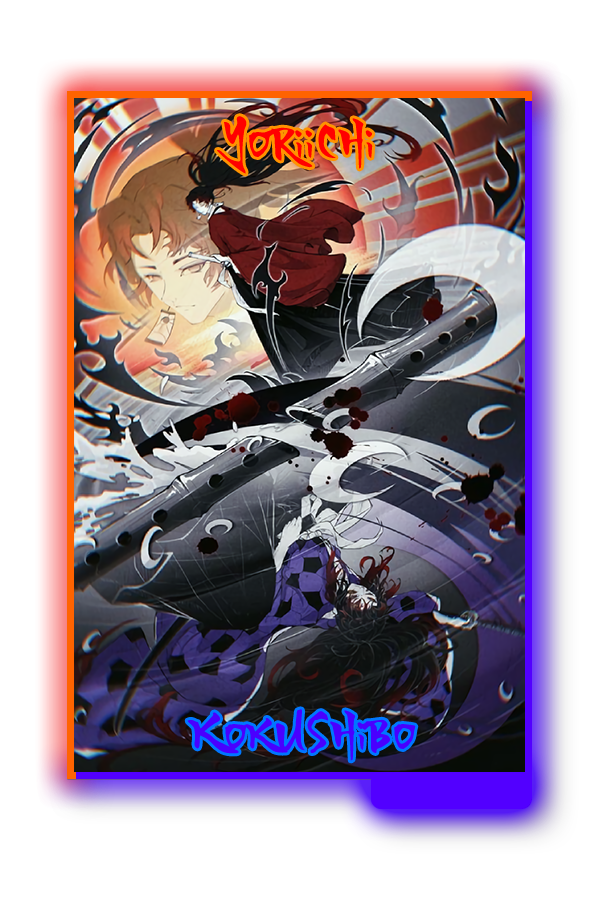
<style>
.page{position:relative;width:600px;height:900px;background:#ffffff}
.page>*{position:absolute;margin:0}
.t1{font:75px "YOZAKURA-Regular";color:#ff0000}
.t2{font:75px "YOZAKURA-Regular";color:#4900ff}
</style>
<div class="page">
<p class="t1" style="left:216px;top:115px;width:157px;height:59px">Yoriichi</p>
<p class="t2" style="left:187px;top:709px;width:229px;height:52px">Kokushibo</p>
</div>
